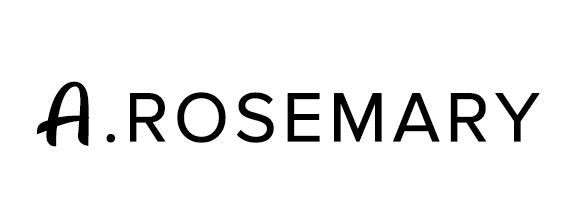
<style>
.page{position:relative;width:577px;height:218px;background:#ffffff}
.page>*{position:absolute;margin:0}
.t1{font:72px "ProximaNova-Regular";letter-spacing:0.05em;color:#000000;text-transform:uppercase;font-weight:bold}
.t2{font:72px "BeautyMountainsPersonalUse";letter-spacing:0.05em;color:#000000;text-transform:uppercase;font-weight:bold}
</style>
<div class="page">
<p class="t1" style="left:37px;top:81px;width:503px;height:66px"><span class="t2">A</span>.Rosemary</p>
</div>
